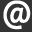
<style>
.page{position:relative;width:32px;height:32px;background:#333333}
.page>*{position:absolute;margin:0}
.t1{font:50px "Candara";color:#ffffff;font-weight:bold}
</style>
<div class="page">
<p class="t1" style="left:3px;top:0px;width:28px;height:30px">@</p>
</div>
